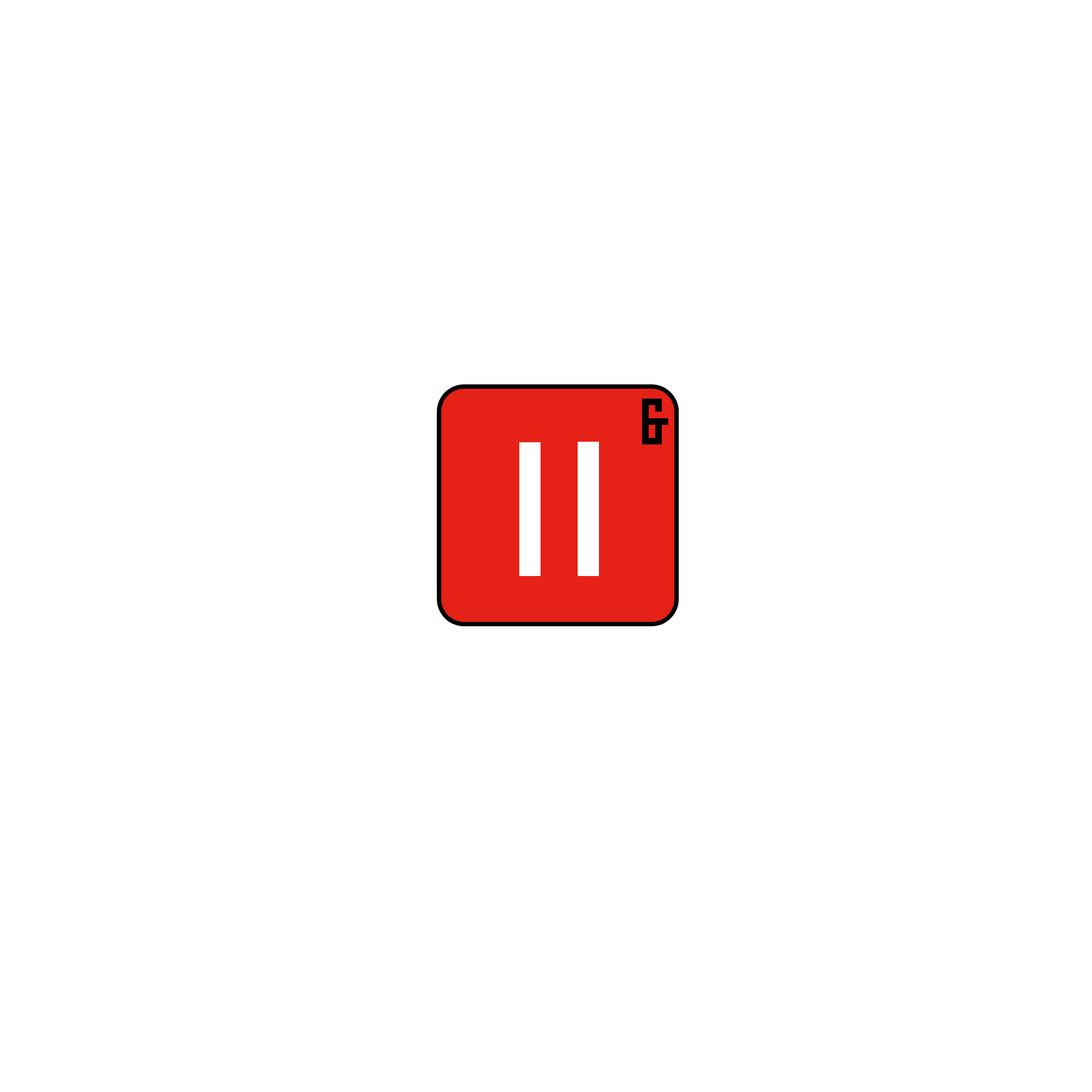
<style>
.page{position:relative;width:1092px;height:1092px;background:#ffffff}
.page>*{position:absolute;margin:0}
.t1{font:65.5px "pxl";color:#000000}
</style>
<div class="page">
<p class="t1" style="left:642px;top:399px;width:26px;height:45px">&amp;</p>
</div>
